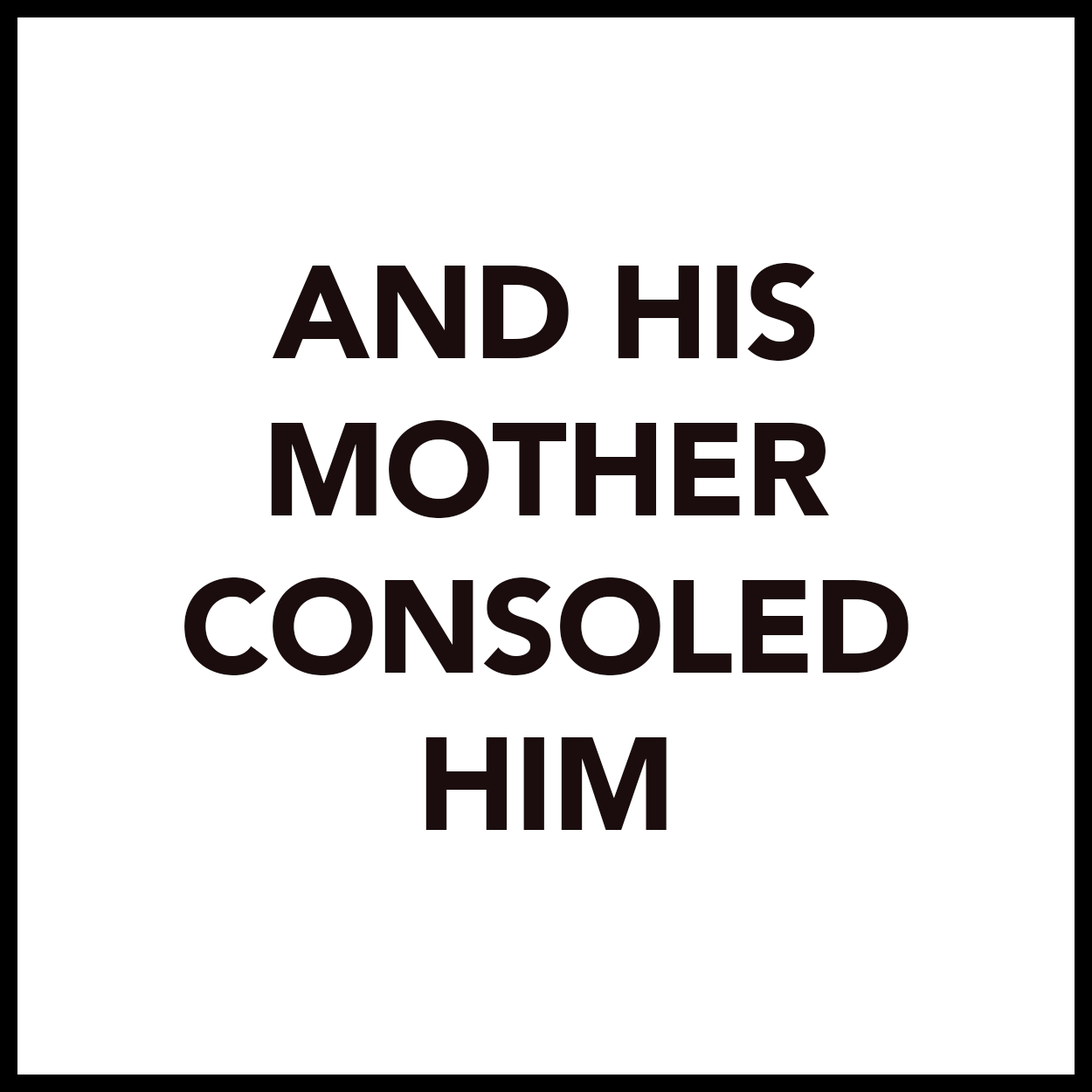
<style>
.page{position:relative;width:1092px;height:1092px;background:#ffffff}
.page>*{position:absolute;margin:0}
.t1{font:131px "Avenir-Black";letter-spacing:-0.01em;color:#1b0d0d}
</style>
<div class="page">
<p class="t1" style="left:184px;top:263px;width:725px;height:567px;text-align:center">AND HIS<br>MOTHER<br>CONSOLED<br>HIM</p>
</div>
